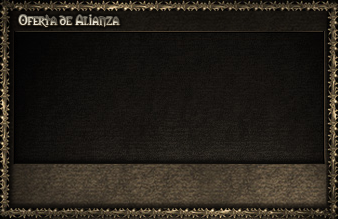
<style>
.page{position:relative;width:338px;height:219px}
.page>*{position:absolute;margin:0}
.t1{font:13px "Morpheus"}
</style>
<div class="page">
<p class="t1" style="left:19px;top:15px;width:101px;height:12px">Oferta de Alianza</p>
</div>
